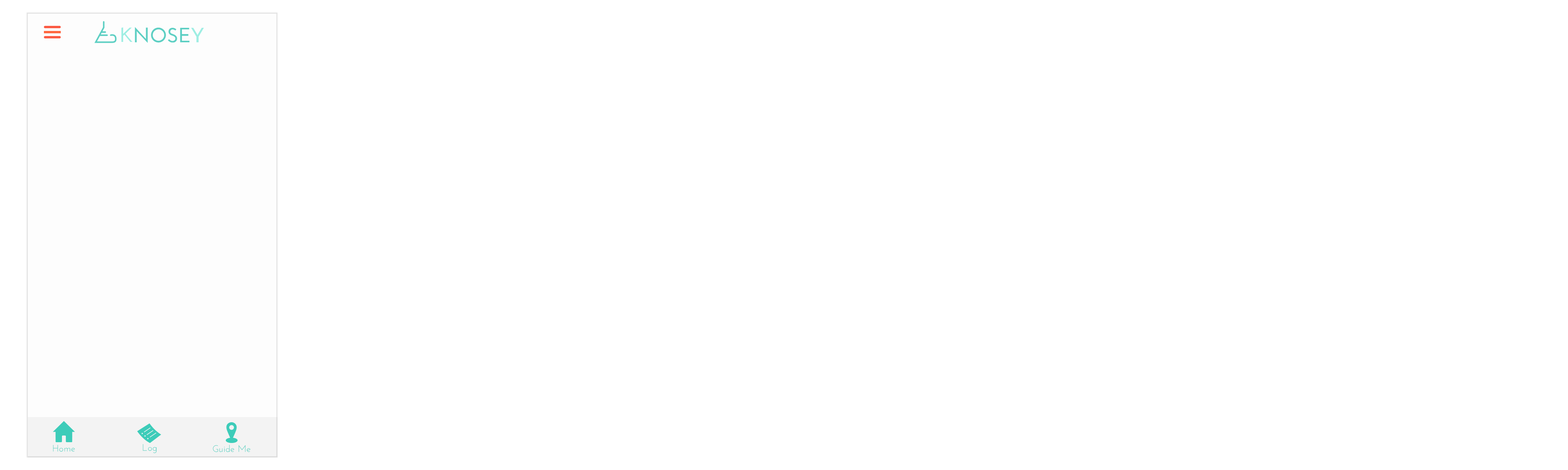
<style>
.page{position:relative;width:1568px;height:470px;background:#ffffff}
.page>*{position:absolute;margin:0}
.t1{font:9.4px "JosefinSans";letter-spacing:0.01em;color:#3eccbb}
</style>
<div class="page">
<p class="t1" style="left:53px;top:445px;width:22px;height:7px">Home</p>
<p class="t1" style="left:143px;top:445px;width:14px;height:9px">Log</p>
<p class="t1" style="left:213px;top:445px;width:37px;height:7px">Guide Me</p>
</div>
